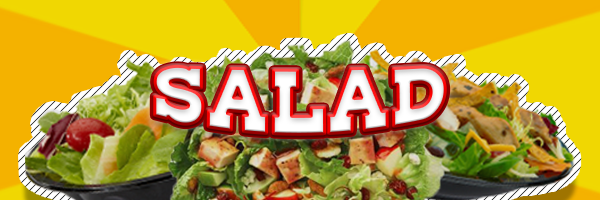
<style>
.page{position:relative;width:600px;height:200px}
.page>*{position:absolute;margin:0}
.t1{font:66.7px "HendersonSlabBasicBlack";color:#ffffff}
</style>
<div class="page">
<p class="t1" style="left:154px;top:66px;width:292px;height:69px">SALAD</p>
</div>
